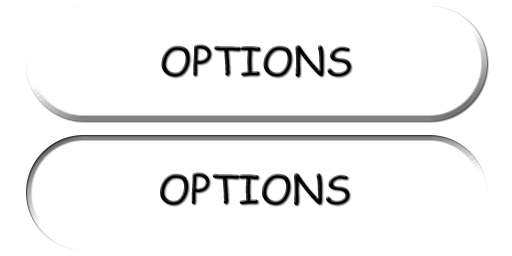
<style>
.page{position:relative;width:512px;height:256px;background:#ffffff}
.page>*{position:absolute;margin:0}
.t1{font:40px "ComicSansMS";color:#000000}
.t2{font:40.3px "ComicSansMS";color:#000000}
</style>
<div class="page">
<p class="t1" style="left:161px;top:44px;width:190px;height:33px">OPTIONS</p>
<p class="t2" style="left:160px;top:172px;width:190px;height:33px">OPTIONS</p>
</div>
